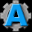
<style>
.page{position:relative;width:32px;height:32px;background:#000000}
.page>*{position:absolute;margin:0}
.t1{font:30px "Arial-Black";color:#0096ff}
</style>
<div class="page">
<p class="t1" style="left:4px;top:4px;width:24px;height:22px">A</p>
</div>
